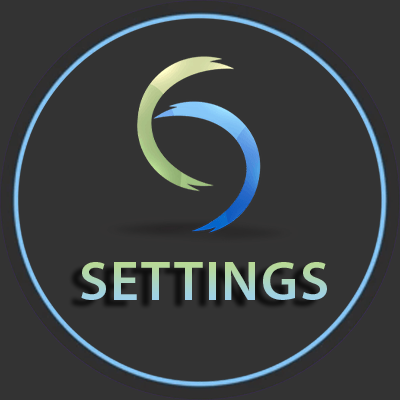
<style>
.page{position:relative;width:400px;height:400px;background:#333333}
.page>*{position:absolute;margin:0}
.t1{font:56px "MyriadPro-Semibold";letter-spacing:0.03em}
</style>
<div class="page">
<p class="t1" style="left:81px;top:262px;width:246px;height:38px">SETTINGS</p>
</div>
